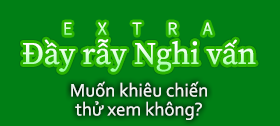
<style>
.page{position:relative;width:280px;height:126px;background:#007f15}
.page>*{position:absolute;margin:0}
.t1{font:31px "SourceSerifRoman-Regular"}
.t2{font:19px/19px "Corbel";color:#ffffff}
</style>
<div class="page">
<p class="t1" style="left:23px;top:39px;width:233px;height:33px">Đầy rẫy Nghi vấn</p>
<p class="t2" style="left:71px;top:81px;width:136px;height:39px;text-align:center;opacity:0.9">Muốn khiêu chiến<br>thử xem không?</p>
</div>
